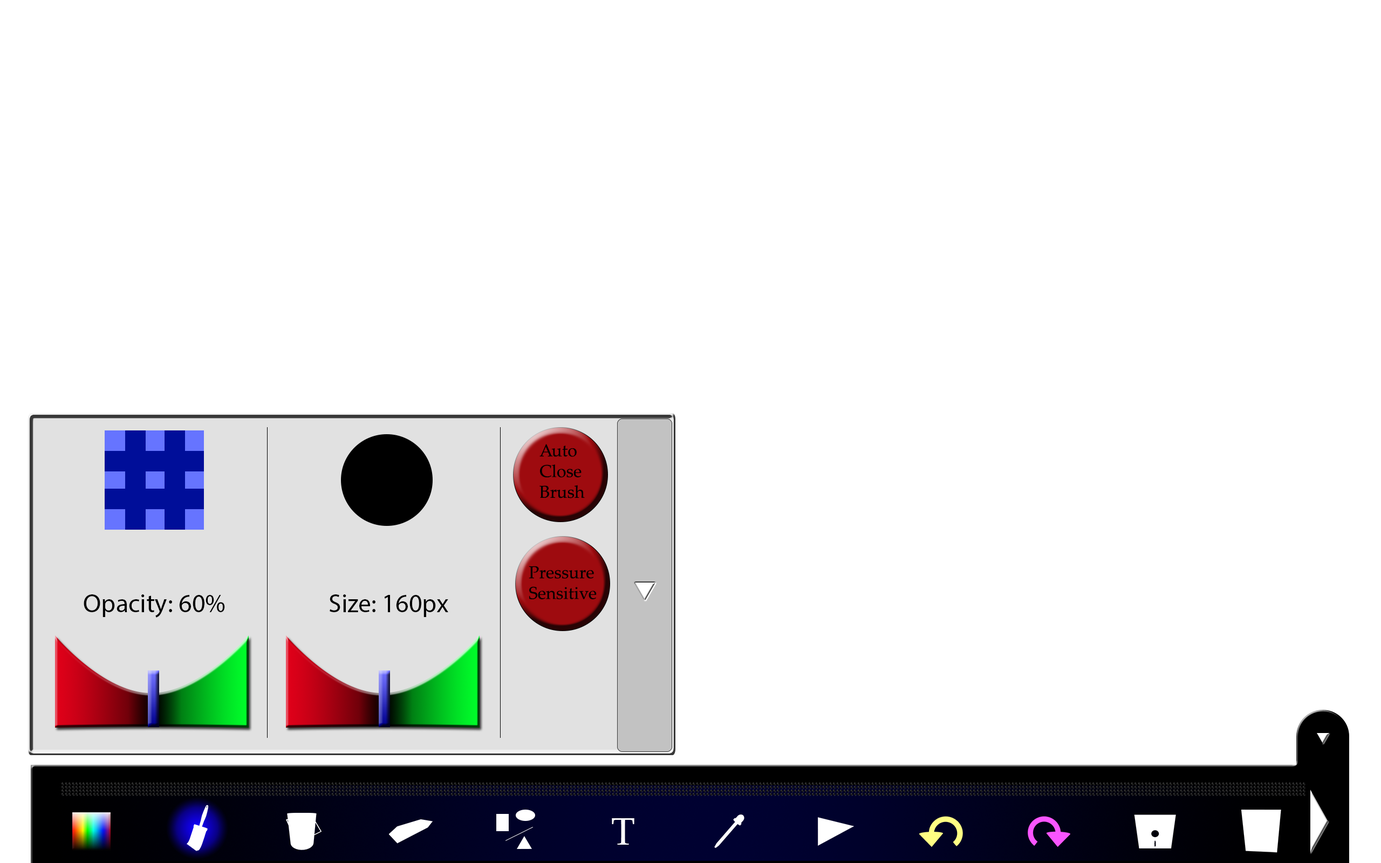
<style>
.page{position:relative;width:1381px;height:863px;background:#ffffff}
.page>*{position:absolute;margin:0}
.t1{font:17.3px "PalatinoLinotype-Roman";color:#000000}
.t2{font:25.8px "MyriadPro-Regular";color:#000000}
.t3{font:38.8px "PalatinoLinotype-Roman";color:#ffffff}
</style>
<div class="page">
<p class="t1" style="left:540px;top:444px;width:45px;height:55px">Auto<br>Close<br>Brush</p>
<p class="t1" style="left:529px;top:566px;width:68px;height:33px">Pressure<br>Sensitive</p>
<p class="t2" style="left:84px;top:595px;width:141px;height:23px">Opacity: 60%</p>
<p class="t2" style="left:330px;top:595px;width:118px;height:22px">Size: 160px</p>
<p class="t3" style="left:612px;top:819px;width:23px;height:26px">T</p>
</div>
